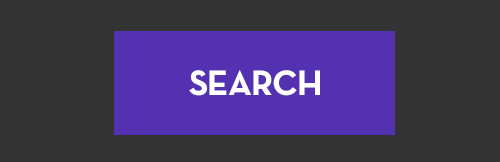
<style>
.page{position:relative;width:500px;height:162px;background:#333333}
.page>*{position:absolute;margin:0}
.t1{font:36px "NeutraText-Bold";letter-spacing:-0.027em;color:#ffffff}
</style>
<div class="page">
<p class="t1" style="left:189px;top:70px;width:131px;height:26px">SEARCH</p>
</div>
